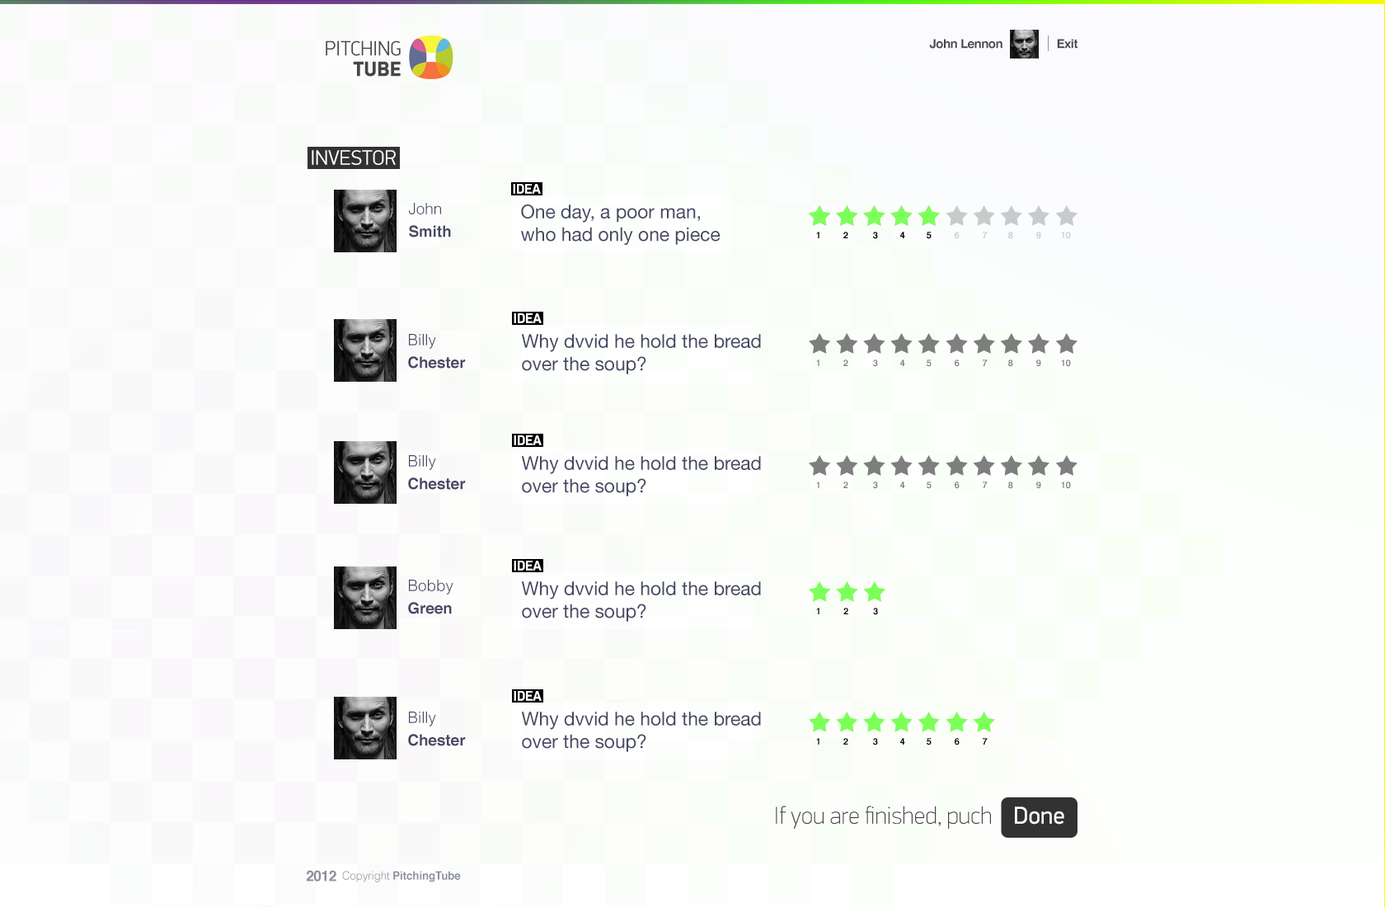
<style>
.page{position:relative;width:1385px;height:907px}
.page>*{position:absolute;margin:0}
.t1{font:20.8px/20.6px "DinDisplayProPF-Light";color:#464646;text-transform:uppercase;scale:0.96 1}
.t2{font:20.8px/20.6px "DinDisplayProPF-Black";color:#464646;text-transform:uppercase;scale:0.96 1}
.t3{font:12.4px "Helvetica-Bold";letter-spacing:-0.03em;color:#464646}
.t4{font:20.8px "DinDisplayProPF-Light";color:#ffffff;text-transform:uppercase}
.t5{font:14px "DinDisplayProPF-Bold";letter-spacing:-0.025em;color:#ffffff;text-transform:uppercase}
.t6{font:15.7px/22.8px "Helvetica-Bold";color:#474863}
.t7{font:15.7px/22.8px "Helvetica-Light";color:#474863}
.t8{font:19px/22.8px "HelveticaNeue";color:#474863}
.t9{font:9px "Helvetica-Bold";color:#000000;text-transform:uppercase}
.t10{font:9px "Helvetica-Bold";color:#c9caca;text-transform:uppercase}
.t11{font:9px "Helvetica-Bold";color:#c9cacb;text-transform:uppercase}
.t12{font:9px "Helvetica-Bold";color:#7c7f7b;text-transform:uppercase}
.t13{font:9px "Helvetica-Bold";color:#7e7f7e;text-transform:uppercase}
.t14{font:24.5px "DinDisplayProPF-Thin";color:#464646}
.t15{font:24.5px "DinDisplayProPF-Regular";color:#ffffff}
.t16{font:14.5px "Helvetica-Bold";letter-spacing:-0.025em;color:#8d8e9b}
.t17{font:11.3px "Helvetica-Bold";color:#8d8e9b;scale:0.96 1}
.t18{font:11.3px "Helvetica-Light";color:#8d8e9b;scale:0.96 1}
</style>
<div class="page">
<p class="t1" style="left:326px;top:40px;width:75px;height:37px;text-align:right">Pitching<br><span class="t2">Tube</span></p>
<p class="t3" style="left:929px;top:39px;width:73px;height:10px">John Lennon</p>
<p class="t3" style="left:1057px;top:39px;width:20px;height:10px">Exit</p>
<p class="t4" style="left:312px;top:150px;width:84px;height:15px">Investor</p>
<p class="t5" style="left:513px;top:184px;width:28px;height:10px">Idea</p>
<p class="t6" style="left:409px;top:203px;width:42px;height:34px"><span class="t7">John <br></span>Smvttith</p>
<p class="t8" style="left:521px;top:204px;width:200px;height:41px">One day, a poor man, <br>who had only one piece</p>
<p class="t9" style="left:816px;top:232px;width:3px;height:6px">1</p>
<p class="t9" style="left:816px;top:232px;width:3px;height:6px">1</p>
<p class="t9" style="left:843px;top:232px;width:5px;height:6px">2</p>
<p class="t9" style="left:843px;top:232px;width:5px;height:6px">2</p>
<p class="t9" style="left:873px;top:232px;width:5px;height:7px">3</p>
<p class="t9" style="left:873px;top:232px;width:5px;height:7px">3</p>
<p class="t9" style="left:900px;top:232px;width:5px;height:6px">4</p>
<p class="t9" style="left:900px;top:232px;width:5px;height:6px">4</p>
<p class="t9" style="left:927px;top:232px;width:5px;height:7px">5</p>
<p class="t9" style="left:927px;top:232px;width:5px;height:7px">5</p>
<p class="t10" style="left:955px;top:232px;width:5px;height:7px">6</p>
<p class="t10" style="left:983px;top:232px;width:5px;height:6px">7</p>
<p class="t10" style="left:1008px;top:232px;width:5px;height:7px">8</p>
<p class="t11" style="left:1036px;top:232px;width:5px;height:7px">9</p>
<p class="t11" style="left:1061px;top:232px;width:10px;height:7px">10</p>
<p class="t5" style="left:514px;top:313px;width:28px;height:10px">Idea</p>
<p class="t6" style="left:408px;top:334px;width:58px;height:34px"><span class="t7">Billy <br></span>Chester</p>
<p class="t8" style="left:521px;top:334px;width:240px;height:40px">Why dvvid he hold the bread <br>over the soup?</p>
<p class="t12" style="left:816px;top:359px;width:3px;height:7px">1</p>
<p class="t12" style="left:843px;top:359px;width:5px;height:7px">2</p>
<p class="t13" style="left:873px;top:359px;width:5px;height:8px">3</p>
<p class="t12" style="left:900px;top:359px;width:5px;height:7px">4</p>
<p class="t12" style="left:927px;top:359px;width:5px;height:8px">5</p>
<p class="t13" style="left:955px;top:359px;width:5px;height:8px">6</p>
<p class="t12" style="left:983px;top:359px;width:5px;height:7px">7</p>
<p class="t12" style="left:1008px;top:359px;width:5px;height:8px">8</p>
<p class="t13" style="left:1036px;top:359px;width:5px;height:8px">9</p>
<p class="t13" style="left:1061px;top:359px;width:10px;height:8px">10</p>
<p class="t5" style="left:514px;top:435px;width:28px;height:10px">Idea</p>
<p class="t6" style="left:408px;top:455px;width:58px;height:35px"><span class="t7">Billy <br></span>Chester</p>
<p class="t8" style="left:521px;top:456px;width:240px;height:40px">Why dvvid he hold the bread <br>over the soup?</p>
<p class="t13" style="left:816px;top:481px;width:3px;height:7px">1</p>
<p class="t13" style="left:843px;top:481px;width:5px;height:7px">2</p>
<p class="t12" style="left:873px;top:481px;width:5px;height:8px">3</p>
<p class="t13" style="left:900px;top:481px;width:5px;height:7px">4</p>
<p class="t13" style="left:927px;top:481px;width:5px;height:8px">5</p>
<p class="t12" style="left:955px;top:481px;width:5px;height:8px">6</p>
<p class="t13" style="left:983px;top:481px;width:5px;height:7px">7</p>
<p class="t13" style="left:1008px;top:481px;width:5px;height:8px">8</p>
<p class="t12" style="left:1036px;top:481px;width:5px;height:8px">9</p>
<p class="t13" style="left:1061px;top:481px;width:10px;height:8px">10</p>
<p class="t5" style="left:514px;top:561px;width:28px;height:9px">Idea</p>
<p class="t7" style="left:408px;top:580px;width:45px;height:34px">Bobby <br><span class="t6">Green</span></p>
<p class="t8" style="left:521px;top:581px;width:240px;height:41px">Why dvvid he hold the bread <br>over the soup?</p>
<p class="t9" style="left:816px;top:608px;width:3px;height:6px">1</p>
<p class="t9" style="left:843px;top:608px;width:5px;height:6px">2</p>
<p class="t9" style="left:873px;top:608px;width:5px;height:7px">3</p>
<p class="t5" style="left:514px;top:691px;width:28px;height:10px">Idea</p>
<p class="t6" style="left:408px;top:711px;width:58px;height:35px"><span class="t7">Billy <br></span>Chester</p>
<p class="t8" style="left:521px;top:711px;width:240px;height:41px">Why dvvid he hold the bread <br>over the soup?</p>
<p class="t9" style="left:816px;top:738px;width:3px;height:6px">1</p>
<p class="t9" style="left:843px;top:738px;width:5px;height:6px">2</p>
<p class="t9" style="left:873px;top:738px;width:5px;height:7px">3</p>
<p class="t9" style="left:900px;top:738px;width:5px;height:6px">4</p>
<p class="t9" style="left:927px;top:738px;width:5px;height:7px">5</p>
<p class="t9" style="left:955px;top:738px;width:5px;height:7px">6</p>
<p class="t9" style="left:983px;top:738px;width:5px;height:6px">7</p>
<p class="t14" style="left:776px;top:805px;width:215px;height:24px">If you are finished, puch</p>
<p class="t15" style="left:1015px;top:806px;width:49px;height:18px">Done</p>
<p class="t16" style="left:306px;top:870px;width:30px;height:11px">2012</p>
<p class="t17" style="left:342px;top:871px;width:119px;height:11px"><span class="t18">Copyright </span>PitchingTube</p>
</div>
